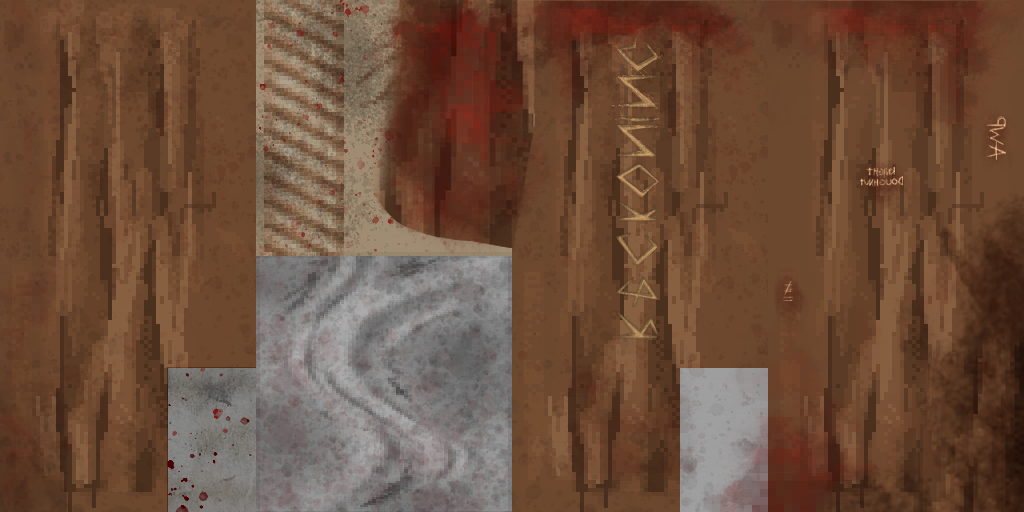
<style>
.page{position:relative;width:1024px;height:512px}
.page>*{position:absolute;margin:0}
.t1{font:50.3px "CarveItUp";letter-spacing:0.077em;color:#ad895a;scale:1.11 1}
</style>
<div class="page">
<p class="t1" style="left:617px;top:39px;width:41px;height:299px;rotate:-90deg">RECKONING</p>
</div>
